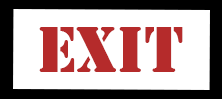
<style>
.page{position:relative;width:222px;height:99px;background:#ffffff}
.page>*{position:absolute;margin:0}
.t1{font:67.2px "Stencil";color:#b52b2b}
</style>
<div class="page">
<p class="t1" style="left:39px;top:27px;width:144px;height:45px">EXIT</p>
</div>
